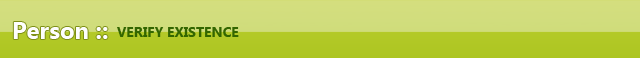
<style>
.page{position:relative;width:640px;height:58px}
.page>*{position:absolute;margin:0}
.t1{font:24px "SegoeUI-Bold";color:#fefefe}
.t2{font:14px "SegoeUI-Bold";color:#336600}
</style>
<div class="page">
<p class="t1" style="left:13px;top:22px;width:95px;height:17px">Person ::</p>
<p class="t2" style="left:117px;top:27px;width:122px;height:10px">VERIFY EXISTENCE</p>
</div>
